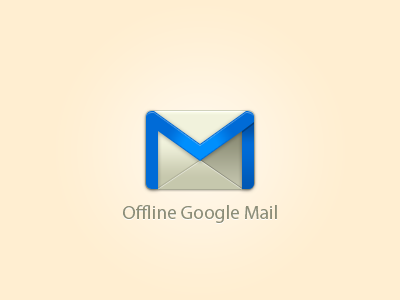
<style>
.page{position:relative;width:400px;height:300px;background:#ffeed1}
.page>*{position:absolute;margin:0}
.t1{font:19.4px "MyriadPro-Regular";color:#8c8d77}
</style>
<div class="page">
<p class="t1" style="left:123px;top:205px;width:154px;height:18px">Offline Google Mail</p>
</div>
